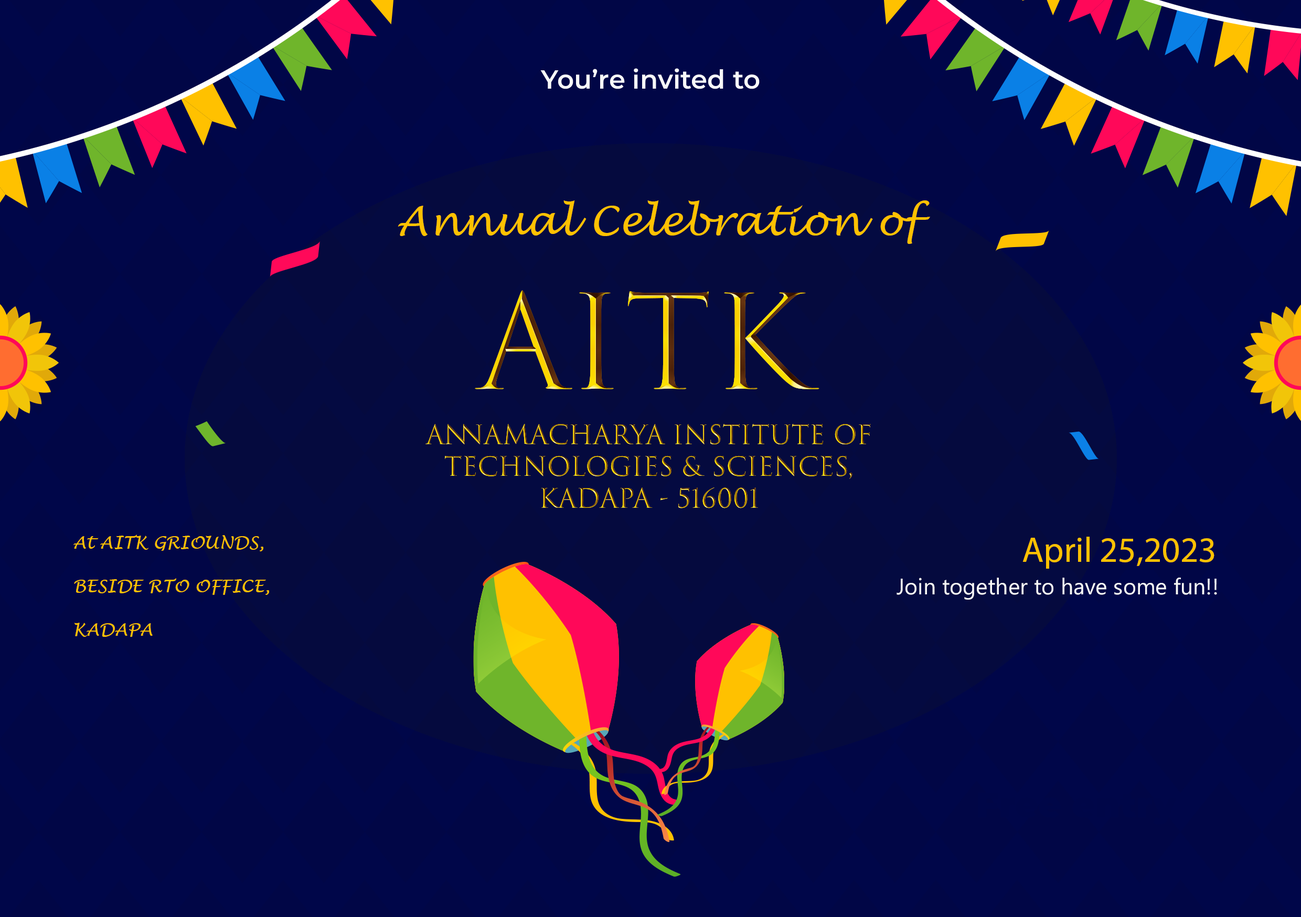
<style>
.page{position:relative;width:1301px;height:917px;background:#010646}
.page>*{position:absolute;margin:0}
.t1{font:26.2px "Montserrat-SemiBold";color:#f9f9f9}
.t2{font:41.1px "LucidaHandwriting-Italic";color:#ffc100}
.t3{font:127.6px "TrajanColor-Concept"}
.t4{font:25.8px/31.8px "TrajanColor-Concept"}
.t5{font:17.5px/43.7px "LucidaHandwriting-Italic";color:#ffc100}
.t6{font:35.5px "MyriadPro-Regular";color:#ffc100}
.t7{font:22.4px "Gadugi";color:#f9f9f9}
</style>
<div class="page">
<p class="t1" style="left:540px;top:68px;width:219px;height:21px">You’re invited to</p>
<p class="t2" style="left:398px;top:200px;width:532px;height:44px">Annual Celebration of</p>
<p class="t3" style="left:475px;top:290px;width:344px;height:99px">AITK</p>
<p class="t4" style="left:425px;top:424px;width:446px;height:84px;text-align:center">Annamacharya Institute of Technologies &amp; Sciences, Kadapa - 516001</p>
<p class="t5" style="left:73px;top:534px;width:196px;height:103px">At AITK GRIOUNDS,<br>BESIDE RTO OFFICE,<br>KADAPA</p>
<p class="t6" style="left:1022px;top:537px;width:192px;height:32px">April 25,2023</p>
<p class="t7" style="left:896px;top:577px;width:321px;height:22px">Join together to have some fun!!</p>
</div>
